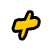
<style>
.page{position:relative;width:52px;height:52px;background:#ffffff}
.page>*{position:absolute;margin:0}
.t1{font:36px "Yesterdaysmeal";color:#ffcc00}
</style>
<div class="page">
<p class="t1" style="left:14px;top:13px;width:24px;height:25px">+</p>
</div>
